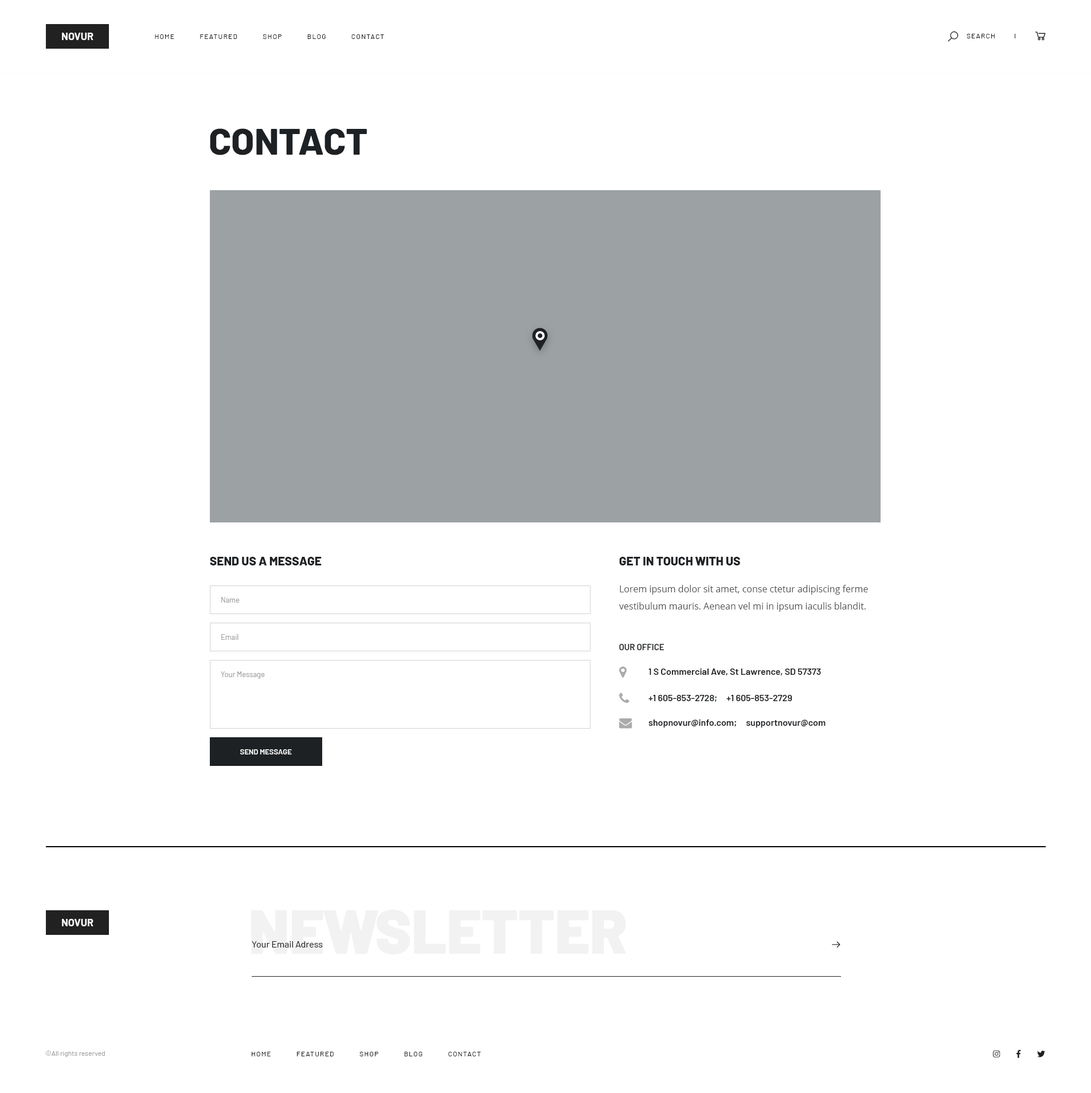
<style>
.page{position:relative;width:1091px;height:1093px;background:#ffffff}
.page>*{position:absolute;margin:0}
.t1{font:10.3px "Barlow-Bold";color:#fefefe;text-transform:uppercase}
.t2{font:6.9px "Barlow-Regular";letter-spacing:0.1em;color:#1e2124;text-transform:uppercase}
.t3{font:37.2px "Barlow-ExtraBold";color:#1e2124;text-transform:uppercase}
.t4{font:12px "Barlow-ExtraBold";color:#1e2124;text-transform:uppercase}
.t5{font:9.2px/17.2px "OpenSans";color:#535455}
.t6{font:7.4px "Barlow-Regular";color:#9e9d9d}
.t7{font:8.6px "Barlow-SemiBold";color:#1e2124;text-transform:uppercase}
.t8{font:9.2px "Barlow-SemiBold";color:#1e2124}
.t9{font:7.4px "Barlow-SemiBold";color:#ffffff;text-transform:uppercase}
.t10{font:61.3px "Barlow-Black";color:#f2f2f2}
.t11{font:9.2px "Barlow-Regular";color:#1e2124}
.t12{font:6.9px "Barlow-Regular";color:#9e9d9d}
</style>
<div class="page">
<p class="t1" style="left:62px;top:33px;width:31px;height:7px">novur</p>
<p class="t2" style="left:155px;top:34px;width:229px;height:5px">Home            Featured            Shop            Blog            Contact</p>
<p class="t2" style="left:966px;top:34px;width:28px;height:4px">Search</p>
<p class="t3" style="left:210px;top:128px;width:157px;height:27px">Contact</p>
<p class="t4" style="left:210px;top:557px;width:111px;height:9px">Send Us a Message</p>
<p class="t4" style="left:619px;top:557px;width:121px;height:9px">Get In Touch with us</p>
<p class="t5" style="left:619px;top:585px;width:249px;height:27px">Lorem ipsum dolor sit amet, conse ctetur adipiscing ferme vestibulum mauris. Aenean vel mi in ipsum iaculis blandit.</p>
<p class="t6" style="left:221px;top:597px;width:19px;height:6px">Name</p>
<p class="t6" style="left:221px;top:634px;width:17px;height:6px">Email</p>
<p class="t7" style="left:619px;top:644px;width:45px;height:6px">Our Office</p>
<p class="t6" style="left:221px;top:672px;width:44px;height:7px">Your Message</p>
<p class="t8" style="left:648px;top:669px;width:173px;height:7px">1 S Commercial Ave, St Lawrence, SD 57373</p>
<p class="t8" style="left:648px;top:695px;width:144px;height:7px">+1 605-853-2728;     +1 605-853-2729</p>
<p class="t8" style="left:648px;top:720px;width:177px;height:8px">shopnovur@info.com;     supportnovur@com</p>
<p class="t9" style="left:240px;top:750px;width:52px;height:5px">Send Message</p>
<p class="t10" style="left:251px;top:910px;width:375px;height:45px">NEWSLETTER</p>
<p class="t1" style="left:62px;top:919px;width:31px;height:8px">Novur</p>
<p class="t11" style="left:252px;top:942px;width:71px;height:6px">Your Email Adress</p>
<p class="t12" style="left:46px;top:1051px;width:59px;height:6px">©All rights reserved</p>
<p class="t2" style="left:252px;top:1052px;width:229px;height:5px">Home            Featured            Shop            Blog            Contact</p>
</div>
